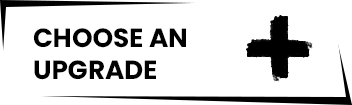
<style>
.page{position:relative;width:352px;height:105px;background:#ffffff}
.page>*{position:absolute;margin:0}
.t1{font:26.3px "Poppins-Bold";color:#000000}
</style>
<div class="page">
<p class="t1" style="left:33px;top:28px;width:153px;height:52px">CHOOSE AN<br>UPGRADE</p>
</div>
